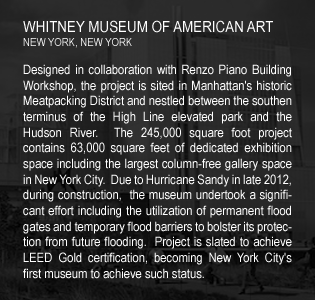
<style>
.page{position:relative;width:315px;height:300px}
.page>*{position:absolute;margin:0}
.t1{font:15.6px "ArialNarrow";color:#ffffff;scale:1.05 1}
.t2{font:11.1px "ArialNarrow";color:#ffffff;scale:1.05 1}
.t3{font:13.1px "ArialNarrow";color:#ffffff;scale:1.05 1}
</style>
<div class="page">
<p class="t1" style="left:23px;top:20px;width:250px;height:13px">WHITNEY MUSEUM OF AMERICAN ART</p>
<p class="t2" style="left:23px;top:38px;width:109px;height:10px">NEW YORK, NEW YORK</p>
<p class="t3" style="left:23px;top:64px;width:269px;height:215px;text-align:justify">Designed in collaboration with Renzo Piano Building Workshop, the project is sited in Manhattan's historic Meatpacking District and nestled between the southen terminus of the High Line elevated park and the Hudson River.  The 245,000 square foot project contains 63,000 square feet of dedicated exhibition space including the largest column-free gallery space in New York City.  Due to Hurricane Sandy in late 2012, during construction,  the museum undertook a significant effort including the utilization of permanent flood gates and temporary flood barriers to bolster its protection from future flooding.  Project is slated to achieve LEED Gold certification, becoming New York City's first museum to achieve such status.</p>
</div>
